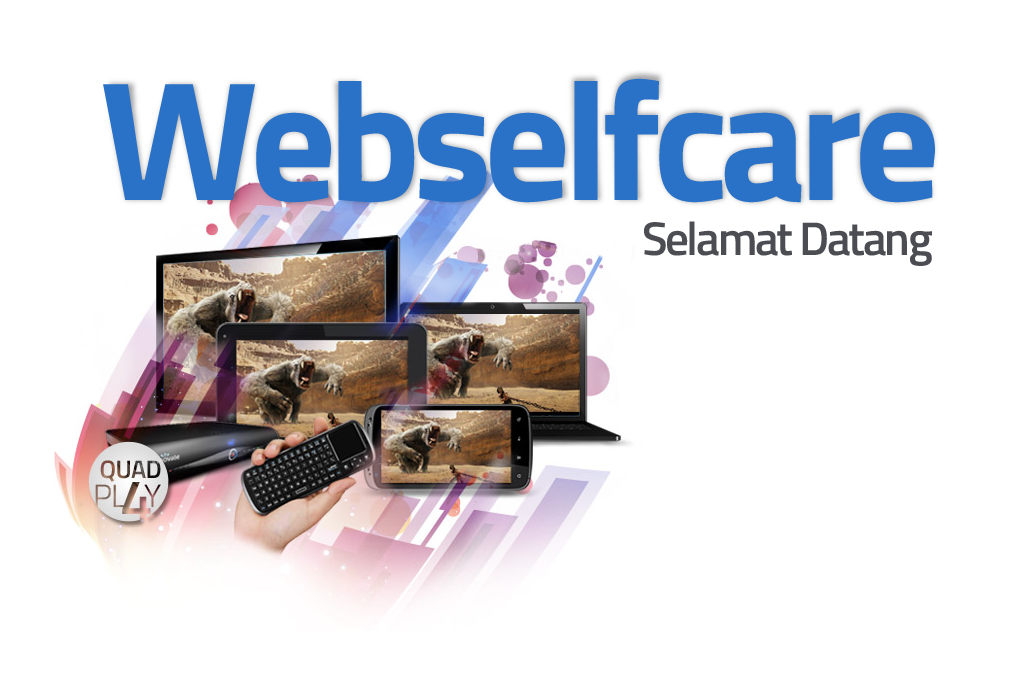
<style>
.page{position:relative;width:1024px;height:676px;background:#ffffff}
.page>*{position:absolute;margin:0}
.t1{font:170.4px "TitilliumWeb-Bold";letter-spacing:-0.05em;color:#2a72c7}
.t2{font:47.2px "TitilliumWeb-SemiBold";letter-spacing:-0.05em;color:#4d4e53}
</style>
<div class="page">
<p class="t1" style="left:103px;top:78px;width:832px;height:125px">Webselfcare</p>
<p class="t2" style="left:644px;top:221px;width:288px;height:45px">Selamat Datang</p>
</div>
